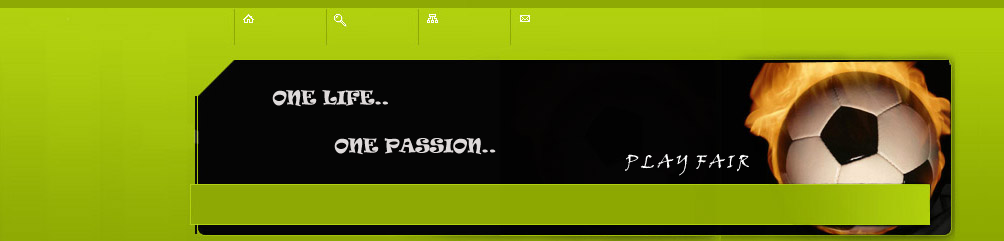
<style>
.page{position:relative;width:1004px;height:241px}
.page>*{position:absolute;margin:0}
.t1{font:18px/16px "Ravie";letter-spacing:-0.025em;color:#dedada;text-transform:uppercase}
.t2{font:18px/16px "MyriadPro-Regular";letter-spacing:-0.025em;color:#dedada;text-transform:uppercase}
.t3{font:18px "VinerHandITC";letter-spacing:-0.025em;color:#ffffff;text-transform:uppercase}
.t4{font:18px "RosewoodStd-Regular";letter-spacing:-0.025em;color:#ffffff;text-transform:uppercase}
</style>
<div class="page">
<p class="t1" style="left:272px;top:90px;width:224px;height:65px"><span class="t2"><br>   </span>One Life..<br> <br><br>  One Passion..</p>
<p class="t3" style="left:625px;top:154px;width:124px;height:22px"><span class="t4"><br>  <br> <br></span><br>   <br>   P L a y  F a i r</p>
</div>
